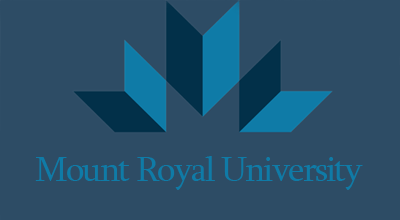
<style>
.page{position:relative;width:400px;height:220px;background:#2d4c65}
.page>*{position:absolute;margin:0}
.t1{font:36px "Sylfaen";letter-spacing:-0.05em;color:#0f7ba7}
</style>
<div class="page">
<p class="t1" style="left:35px;top:156px;width:328px;height:34px">Mount Royal University</p>
</div>
